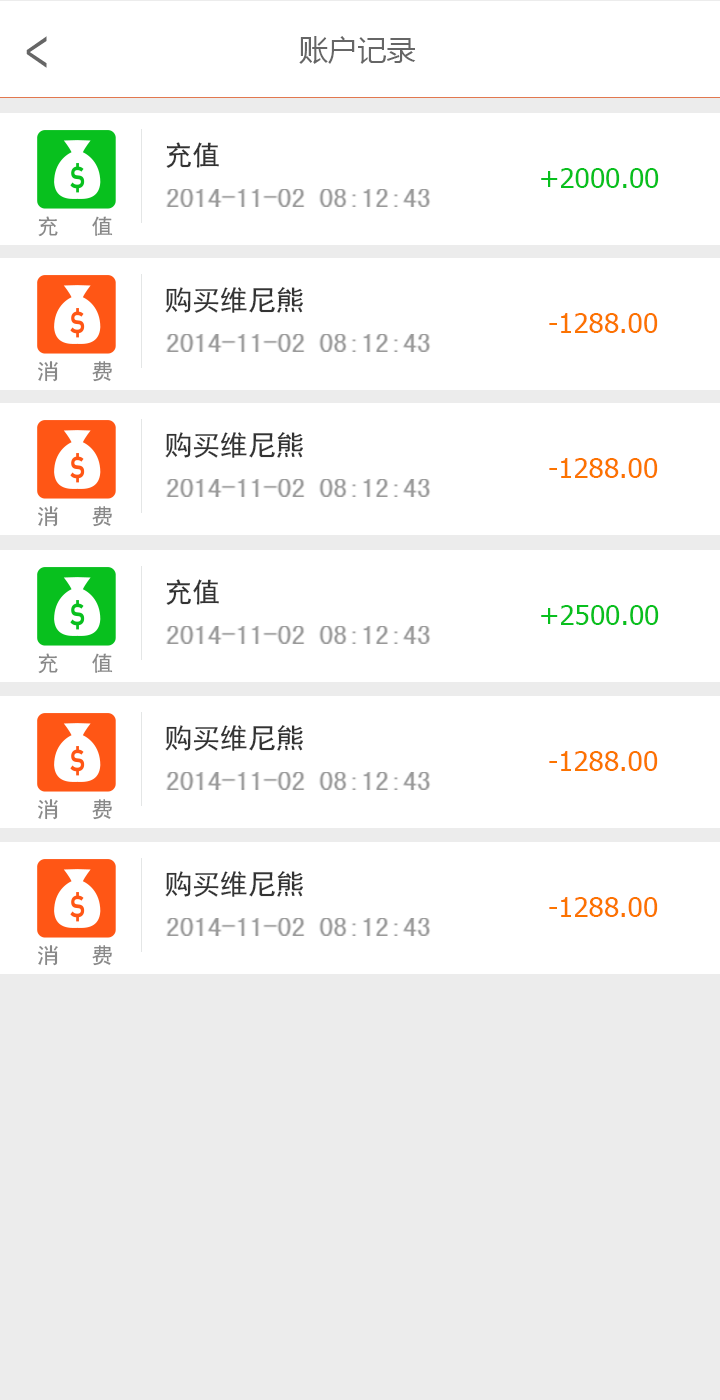
<style>
.page{position:relative;width:720px;height:1400px;background:#ffffff}
.page>*{position:absolute;margin:0}
.t1{font:51.9px "AdobeHeitiStd-Regular";color:#666666;scale:0.72 1}
.t2{font:29.2px "MicrosoftYaHei";color:#666666}
.t3{font:27.9px "SimHei";color:#333333}
.t4{font:27.9px "Tahoma";color:#08c01e}
.t5{font:27.9px "SimHei";color:#999999}
.t6{font:21.7px "SimHei";color:#888888}
.t7{font:27.9px "Tahoma";color:#fc7300}
</style>
<div class="page">
<p class="t1" style="left:26px;top:36px;width:21px;height:32px;rotate:180deg">&gt;</p>
<p class="t2" style="left:299px;top:36px;width:117px;height:28px">账户记录</p>
<p class="t3" style="left:166px;top:142px;width:53px;height:26px">充值</p>
<p class="t4" style="left:541px;top:168px;width:118px;height:20px">+2000.00</p>
<p class="t5" style="left:166px;top:189px;width:265px;height:18px">2014-11-02 08:12:43</p>
<p class="t6" style="left:38px;top:216px;width:75px;height:21px">充   值</p>
<p class="t3" style="left:165px;top:287px;width:138px;height:26px">购买维尼熊</p>
<p class="t7" style="left:549px;top:313px;width:109px;height:20px">-1288.00</p>
<p class="t5" style="left:166px;top:334px;width:265px;height:18px">2014-11-02 08:12:43</p>
<p class="t6" style="left:38px;top:361px;width:74px;height:21px">消   费</p>
<p class="t3" style="left:165px;top:432px;width:138px;height:26px">购买维尼熊</p>
<p class="t7" style="left:549px;top:458px;width:109px;height:20px">-1288.00</p>
<p class="t5" style="left:166px;top:479px;width:265px;height:18px">2014-11-02 08:12:43</p>
<p class="t6" style="left:38px;top:506px;width:74px;height:21px">消   费</p>
<p class="t3" style="left:166px;top:579px;width:53px;height:26px">充值</p>
<p class="t4" style="left:541px;top:605px;width:118px;height:20px">+2500.00</p>
<p class="t5" style="left:166px;top:626px;width:265px;height:18px">2014-11-02 08:12:43</p>
<p class="t6" style="left:38px;top:653px;width:75px;height:21px">充   值</p>
<p class="t3" style="left:165px;top:725px;width:138px;height:26px">购买维尼熊</p>
<p class="t7" style="left:549px;top:751px;width:109px;height:20px">-1288.00</p>
<p class="t5" style="left:166px;top:772px;width:265px;height:18px">2014-11-02 08:12:43</p>
<p class="t6" style="left:38px;top:799px;width:74px;height:21px">消   费</p>
<p class="t3" style="left:165px;top:871px;width:138px;height:26px">购买维尼熊</p>
<p class="t7" style="left:549px;top:897px;width:109px;height:20px">-1288.00</p>
<p class="t5" style="left:166px;top:918px;width:265px;height:18px">2014-11-02 08:12:43</p>
<p class="t6" style="left:38px;top:945px;width:74px;height:21px">消   费</p>
</div>
